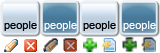
<style>
.page{position:relative;width:160px;height:53px}
.page>*{position:absolute;margin:0}
.t1{font:11px "ArialMT";color:#000000}
.t2{font:11px "ArialMT";color:#fefefe}
.t3{font:11px "ArialMT";color:#ffffff}
</style>
<div class="page">
<p class="t1" style="left:4px;top:21px;width:33px;height:10px">people</p>
<p class="t2" style="left:44px;top:21px;width:33px;height:10px">people</p>
<p class="t1" style="left:83px;top:21px;width:33px;height:10px">people</p>
<p class="t3" style="left:123px;top:21px;width:33px;height:10px">people</p>
</div>
